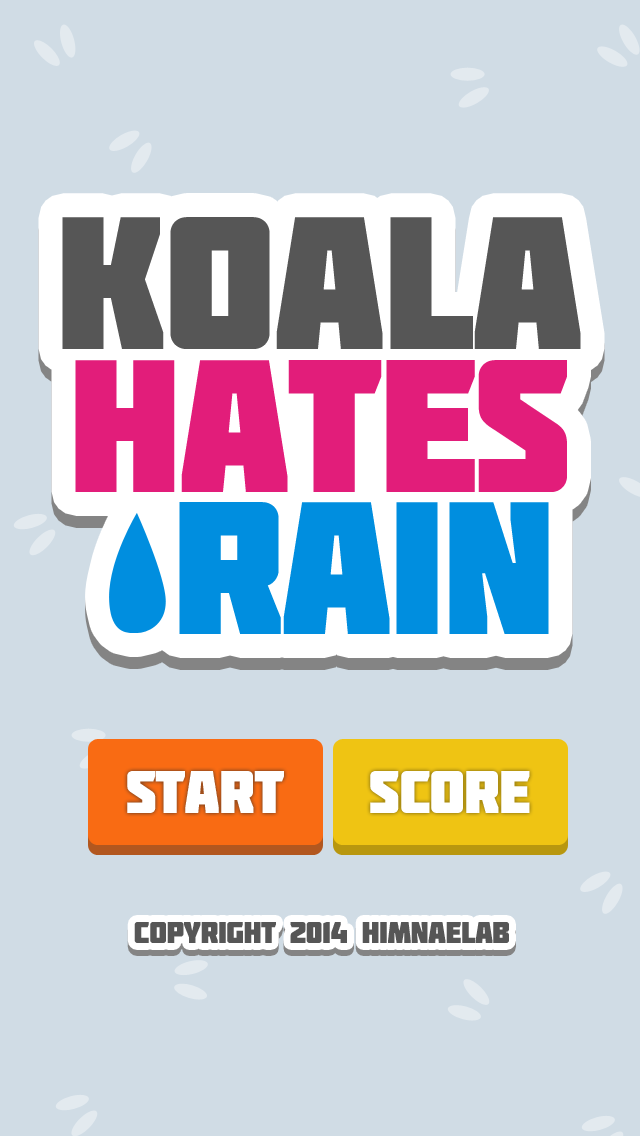
<style>
.page{position:relative;width:640px;height:1136px;background:#d0dce5}
.page>*{position:absolute;margin:0}
.t1{font:188.4px/142.3px "Molot";letter-spacing:-0.02em;color:#565656}
.t2{font:188.4px/142.3px "Molot";letter-spacing:-0.02em;color:#e21d7a}
.t3{font:188.4px/142.3px "Molot";letter-spacing:-0.02em;color:#008edf}
.t4{font:60px "Molot";letter-spacing:-0.02em;color:#ffffff}
.t5{font:30px "Molot";letter-spacing:-0.02em;color:#565656}
</style>
<div class="page">
<p class="t1" style="left:62px;top:217px;width:519px;height:417px;text-align:center">koala<br><span class="t2">hates<br> </span><span class="t3">rain</span></p>
<p class="t4" style="left:127px;top:771px;width:157px;height:42px">START</p>
<p class="t4" style="left:370px;top:771px;width:160px;height:42px">score</p>
<p class="t5" style="left:134px;top:922px;width:375px;height:21px">copyright 2014 himnaeLab</p>
</div>
